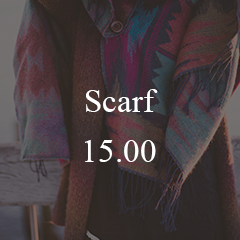
<style>
.page{position:relative;width:240px;height:240px}
.page>*{position:absolute;margin:0}
.t1{font:33.3px/50px "TimesNewRomanPSMT";color:#ffffff}
</style>
<div class="page">
<p class="t1" style="left:85px;top:89px;width:73px;height:73px;text-align:center">Scarf<br>15.00</p>
</div>
